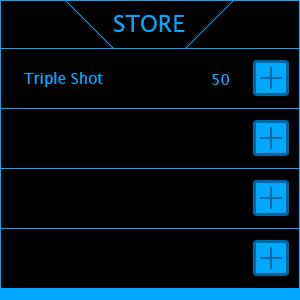
<style>
.page{position:relative;width:300px;height:300px;background:#000000}
.page>*{position:absolute;margin:0}
.t1{font:23px "LucidaSans";color:#00a8ff}
.t2{font:15px "LucidaSans";color:#00a8ff}
</style>
<div class="page">
<p class="t1" style="left:114px;top:15px;width:71px;height:17px">STORE</p>
<p class="t2" style="left:24px;top:72px;width:79px;height:15px">Triple Shot</p>
<p class="t2" style="left:212px;top:74px;width:18px;height:11px">50</p>
</div>
